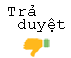
<style>
.page{position:relative;width:71px;height:58px;background:#ffffff}
.page>*{position:absolute;margin:0}
.t1{font:12px/13.3px "CourierNewPSMT";color:#000000}
</style>
<div class="page">
<p class="t1" style="left:8px;top:5px;width:57px;height:27px">Trả<br> duyệt</p>
</div>
